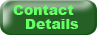
<style>
.page{position:relative;width:97px;height:35px;background:#276027}
.page>*{position:absolute;margin:0}
.t1{font:14px "Arial-Black";color:#66ff66}
</style>
<div class="page">
<p class="t1" style="left:13px;top:3px;width:61px;height:16px">Contact</p>
<p class="t1" style="left:25px;top:17px;width:54px;height:16px">Details</p>
</div>
